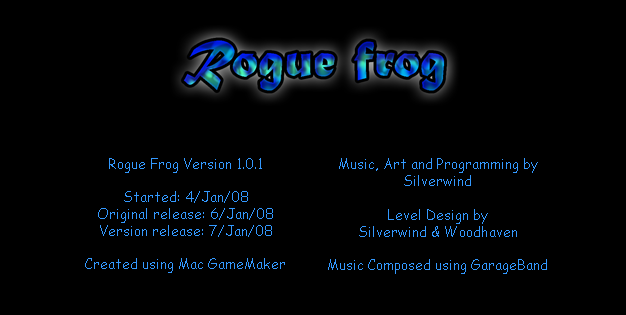
<style>
.page{position:relative;width:626px;height:315px;background:#000000}
.page>*{position:absolute;margin:0}
.t1{font:14px "ComicSansMS";color:#3399ff}
</style>
<div class="page">
<p class="t1" style="left:85px;top:158px;width:200px;height:115px;text-align:center">Rogue Frog Version 1.0.1<br><br>Started: 4/Jan/08<br>Original release: 6/Jan/08<br>Version release: 7/Jan/08<br><br>Created using Mac GameMaker</p>
<p class="t1" style="left:328px;top:158px;width:219px;height:116px;text-align:center">Music, Art and Programming by<br>Silverwind<br><br>Level Design by<br>Silverwind &amp; Woodhaven<br><br>Music Composed using GarageBand</p>
</div>
